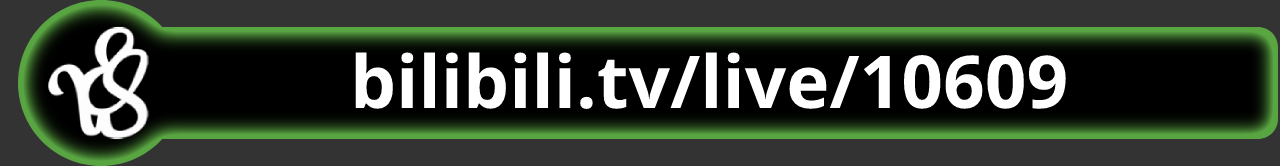
<style>
.page{position:relative;width:1280px;height:166px;background:#333333}
.page>*{position:absolute;margin:0}
.t1{font:73px "OpenSans-Bold";color:#ffffff}
</style>
<div class="page">
<p class="t1" style="left:355px;top:52px;width:711px;height:57px">bilibili.tv/live/10609</p>
</div>
